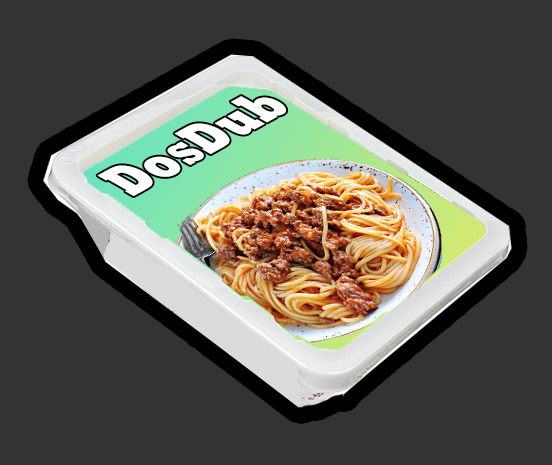
<style>
.page{position:relative;width:552px;height:465px;background:#333333}
.page>*{position:absolute;margin:0}
.t1{font:61.5px "Rockwell-ExtraBold";color:#fefefe;scale:0.64 1}
</style>
<div class="page">
<p class="t1" style="left:97px;top:96px;width:190px;height:100px;rotate:-29deg">DosDub</p>
</div>
